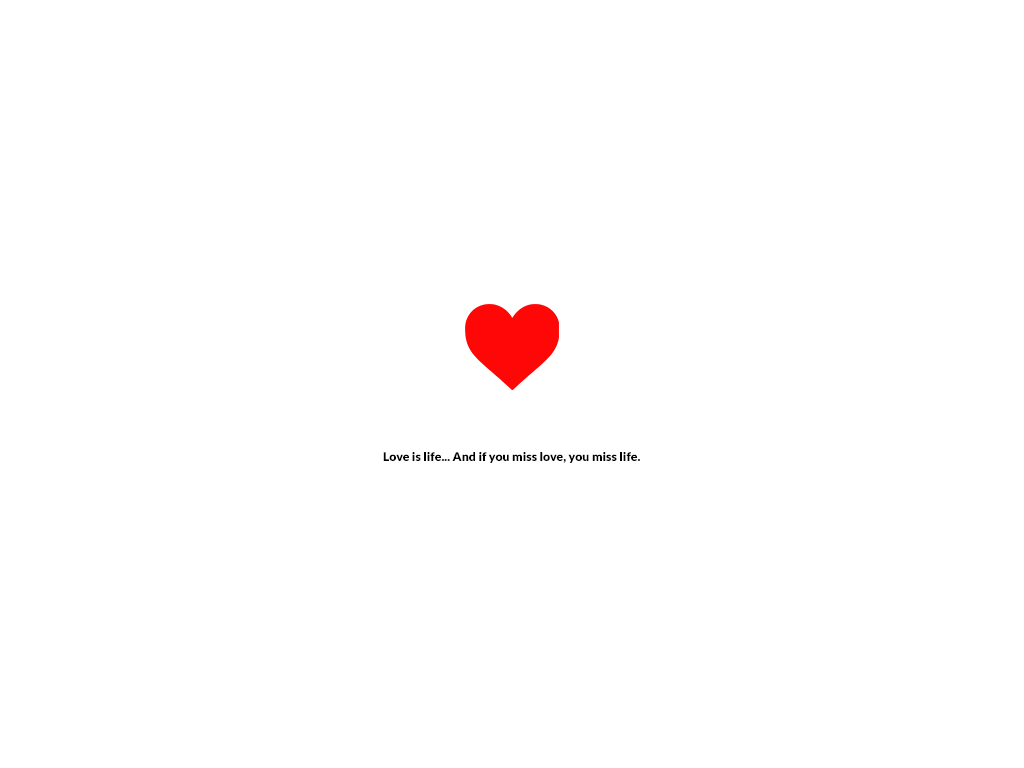
<style>
.page{position:relative;width:1024px;height:768px;background:#ffffff}
.page>*{position:absolute;margin:0}
.t1{font:12px "Lato-Black";color:#000000;scale:1.03 1}
</style>
<div class="page">
<p class="t1" style="left:383px;top:452px;width:257px;height:11px">Love is life... And if you miss love, you miss life.</p>
</div>
